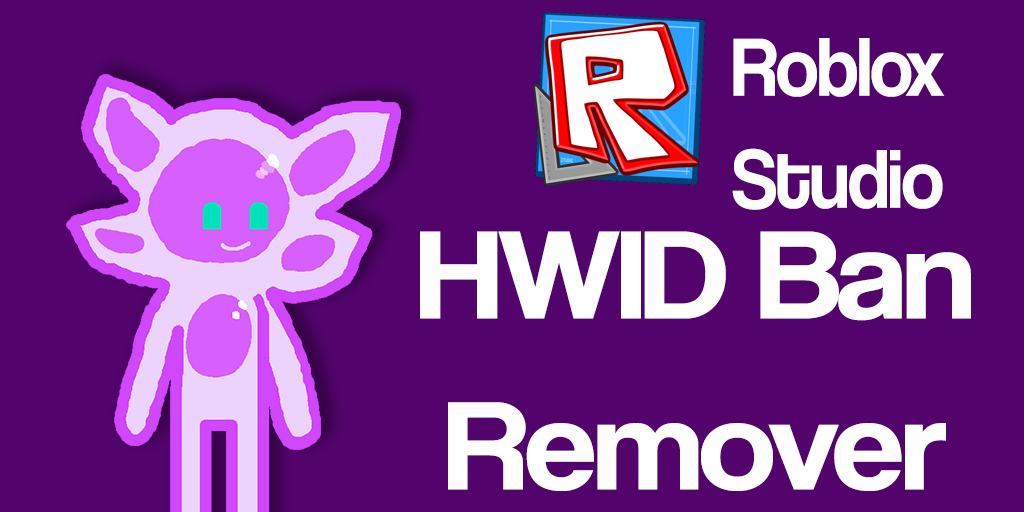
<style>
.page{position:relative;width:1024px;height:512px;background:#52036c}
.page>*{position:absolute;margin:0}
.t1{font:85.9px "CoolveticaRg-Regular";letter-spacing:-0.02em;color:#ffffff;scale:0.92 1}
.t2{font:130.9px "CoolveticaRg-Regular";letter-spacing:-0.02em;color:#ffffff;scale:1.09 1}
</style>
<div class="page">
<p class="t1" style="left:732px;top:38px;width:213px;height:172px;text-align:center">Roblox<br>Studio</p>
<p class="t2" style="left:420px;top:231px;width:551px;height:260px;text-align:center">HWID Ban<br>Remover</p>
</div>
